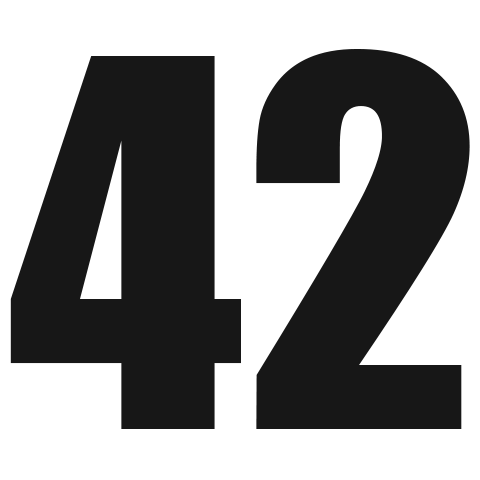
<style>
.page{position:relative;width:480px;height:480px;background:#ffffff}
.page>*{position:absolute;margin:0}
.t1{font:472.3px "Impact";color:#171717}
</style>
<div class="page">
<p class="t1" style="left:10px;top:49px;width:460px;height:380px">42</p>
</div>
